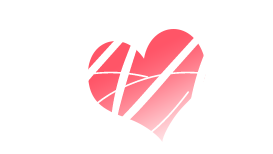
<style>
.page{position:relative;width:273px;height:154px;background:#ffffff}
.page>*{position:absolute;margin:0}
.t1{font:120px "clover";letter-spacing:-0.01em;color:#ffffff}
</style>
<div class="page">
<p class="t1" style="left:2px;top:8px;width:187px;height:139px">A</p>
<p class="t1" style="left:79px;top:8px;width:187px;height:139px">A</p>
</div>
